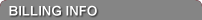
<style>
.page{position:relative;width:202px;height:20px;background:#858585}
.page>*{position:absolute;margin:0}
.t1{font:13.3px "Arial-BoldMT";color:#ffffff}
</style>
<div class="page">
<p class="t1" style="left:9px;top:5px;width:88px;height:11px">BILLING INFO</p>
</div>
